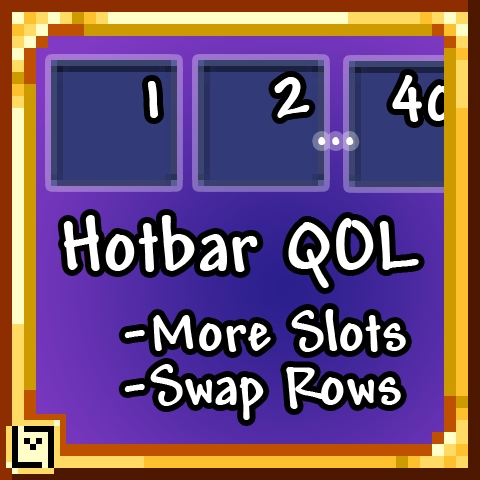
<style>
.page{position:relative;width:480px;height:480px}
.page>*{position:absolute;margin:0}
.t1{font:72px "Andy-Bold";color:#ffffff}
.t2{font:67.6px "Andy-Bold";color:#ffffff}
.t3{font:72px "Andy-Bold";color:#ffffff;scale:0.85 1}
.t4{font:80.4px "Andy-Bold";color:#ffffff}
.t5{font:60.5px/53.8px "Andy-Bold";color:#ffffff}
</style>
<div class="page">
<p class="t1" style="left:274px;top:77px;width:36px;height:41px">2</p>
<p class="t2" style="left:392px;top:75px;width:63px;height:47px">40</p>
<p class="t1" style="left:148px;top:81px;width:10px;height:37px">1</p>
<p class="t3" style="left:318px;top:137px;width:36px;height:8px">...</p>
<p class="t4" style="left:63px;top:215px;width:356px;height:73px">Hotbar QOL</p>
<p class="t5" style="left:124px;top:309px;width:282px;height:111px">-More Slots<br>-Swap Rows</p>
</div>
